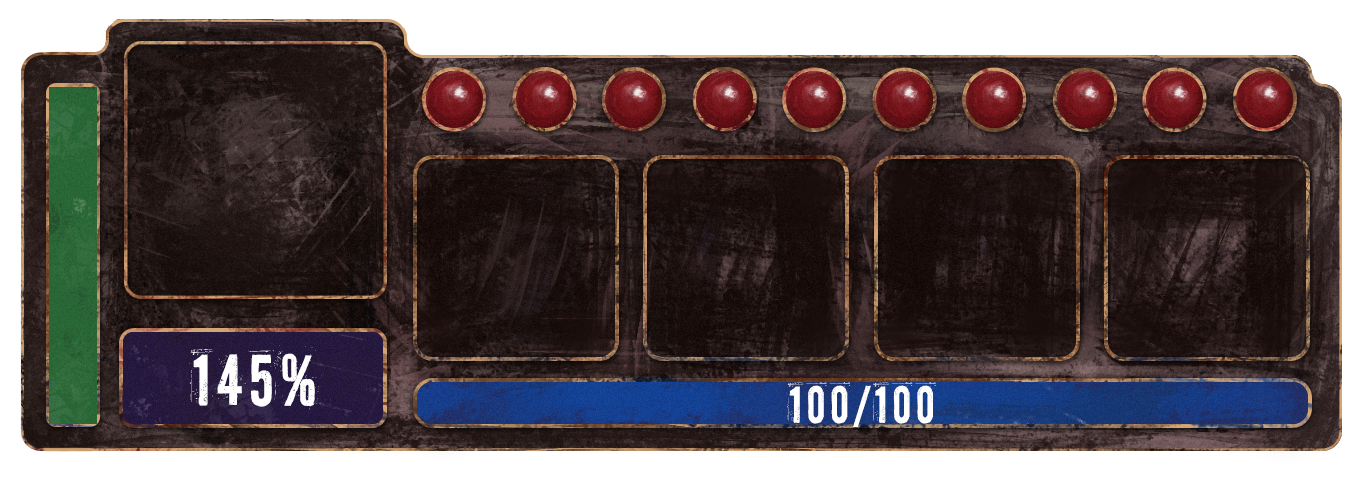
<style>
.page{position:relative;width:1360px;height:478px}
.page>*{position:absolute;margin:0}
.t1{font:70px "PFFuelPro-Regular";color:#ffffff}
.t2{font:50px "PFFuelPro-Regular";color:#ffffff}
</style>
<div class="page">
<p class="t1" style="left:189px;top:345px;width:132px;height:65px">145%</p>
<p class="t2" style="left:786px;top:382px;width:150px;height:51px">100/100</p>
</div>
